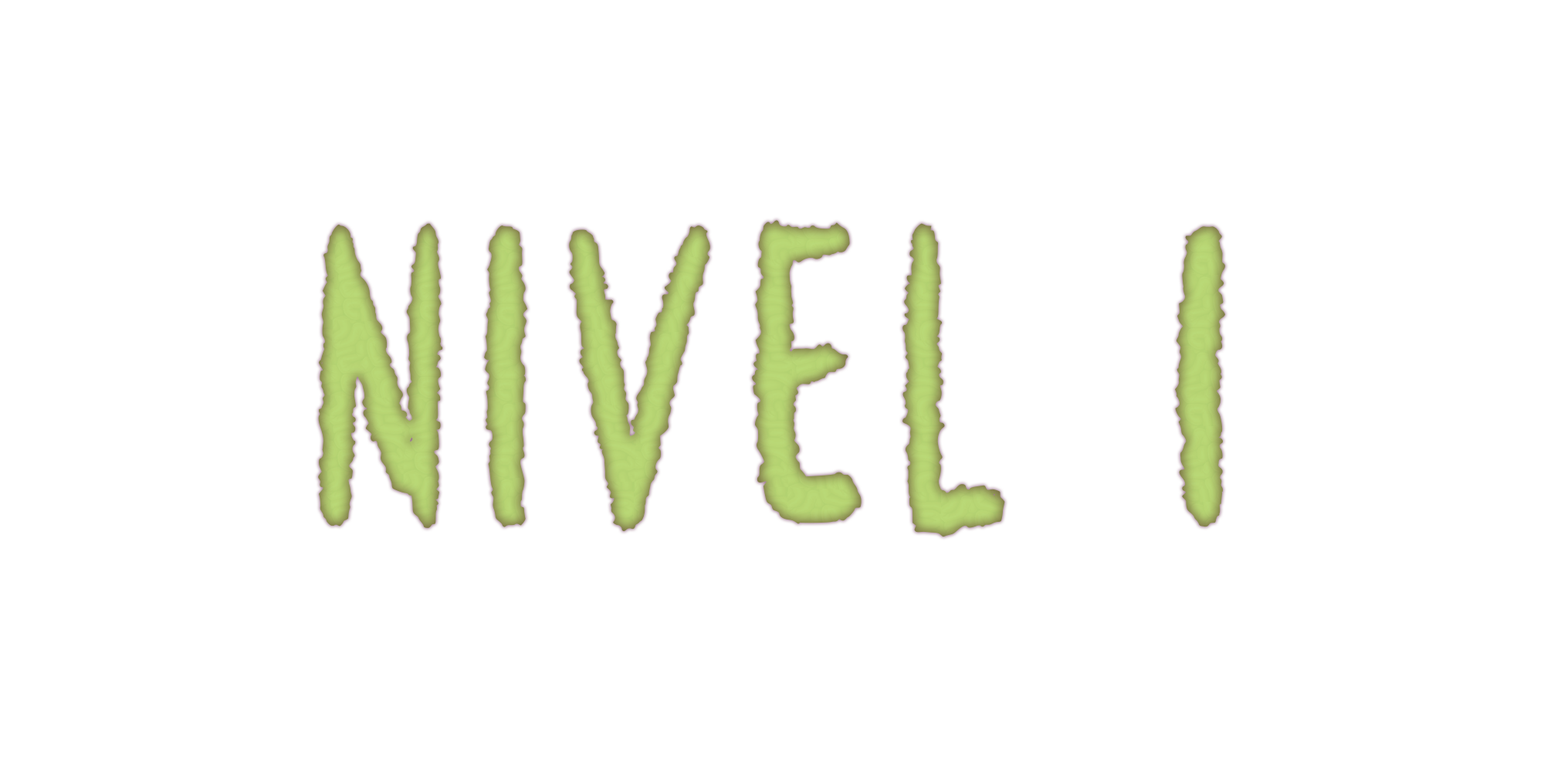
<style>
.page{position:relative;width:1544px;height:772px;background:#ffffff}
.page>*{position:absolute;margin:0}
.t1{font:321.7px "Metalien";letter-spacing:0.1em;color:#b7d974}
</style>
<div class="page">
<p class="t1" style="left:318px;top:220px;width:907px;height:317px">Nivel 1</p>
</div>
